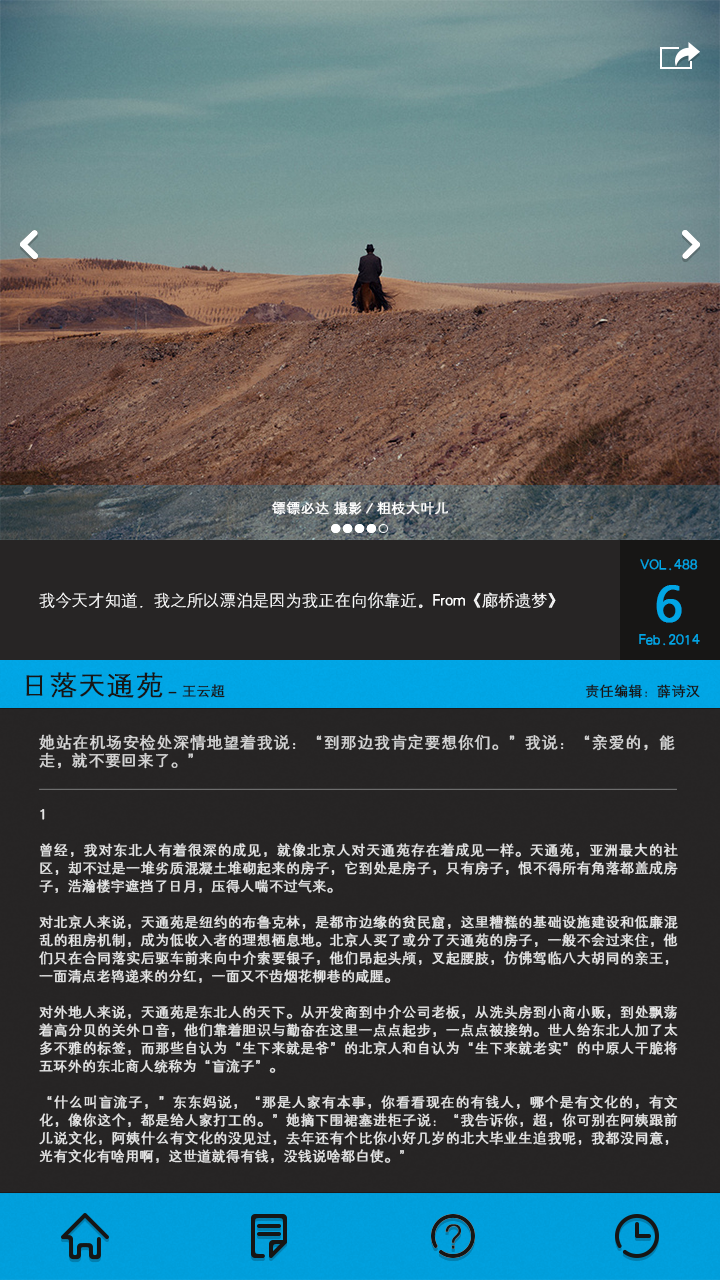
<style>
.page{position:relative;width:720px;height:1280px;background:#272525}
.page>*{position:absolute;margin:0}
.t1{font:13.8px "JXiHei";color:#ffffff;font-weight:bold}
.t2{font:15px "JTeXiDenXian";color:#01a6e6;font-weight:bold}
.t3{font:16px "JTeXiDenXian";color:#ffffff;font-weight:bold}
.t4{font:48px "MicrosoftYaHei";color:#01a6e6;font-weight:bold}
.t5{font:28px "JXiHei";color:#161615;font-weight:bold}
.t6{font:14px "JXiHei";color:#161615;font-weight:bold}
.t7{font:16px/18px "JXiHei";color:#d6d6d6;font-weight:bold}
.t8{font:14px/18px "JXiHei";color:#e6e6e6;font-weight:bold}
</style>
<div class="page">
<p class="t1" style="left:272px;top:501px;width:176px;height:14px">镖镖必达 摄影／粗枝大叶儿</p>
<p class="t2" style="left:640px;top:559px;width:58px;height:12px">VOL.488</p>
<p class="t3" style="left:39px;top:592px;width:517px;height:17px">我今天才知道，我之所以漂泊是因为我正在向你靠近。From《廊桥遗梦》</p>
<p class="t4" style="left:656px;top:585px;width:26px;height:38px">6</p>
<p class="t2" style="left:639px;top:634px;width:61px;height:12px">Feb.2014</p>
<p class="t5" style="left:26px;top:672px;width:137px;height:27px">日落天通苑</p>
<p class="t6" style="left:168px;top:684px;width:57px;height:14px">- 王云超</p>
<p class="t6" style="left:585px;top:684px;width:115px;height:14px">责任编辑：薛诗汉</p>
<p class="t7" style="left:39px;top:734px;width:636px;height:35px;text-align:justify">她站在机场安检处深情地望着我说：“到那边我肯定要想你们。”我说：“亲爱的，能走，就不要回来了。”</p>
<p class="t8" style="left:39px;top:809px;width:639px;height:354px;text-align:justify">1<br><br>曾经，我对东北人有着很深的成见，就像北京人对天通苑存在着成见一样。天通苑，亚洲最大的社区，却不过是一堆劣质混凝土堆砌起来的房子，它到处是房子，只有房子，恨不得所有角落都盖成房子，浩瀚楼宇遮挡了日月，压得人喘不过气来。<br><br>对北京人来说，天通苑是纽约的布鲁克林，是都市边缘的贫民窟，这里糟糕的基础设施建设和低廉混乱的租房机制，成为低收入者的理想栖息地。北京人买了或分了天通苑的房子，一般不会过来住，他们只在合同落实后驱车前来向中介索要银子，他们昂起头颅，叉起腰肢，仿佛驾临八大胡同的亲王，一面清点老鸨递来的分红，一面又不齿烟花柳巷的咸腥。<br><br>对外地人来说，天通苑是东北人的天下。从开发商到中介公司老板，从洗头房到小商小贩，到处飘荡着高分贝的关外口音，他们靠着胆识与勤奋在这里一点点起步，一点点被接纳。世人给东北人加了太多不雅的标签，而那些自认为“生下来就是爷”的北京人和自认为“生下来就老实”的中原人干脆将五环外的东北商人统称为“盲流子”。<br><br>“什么叫盲流子，”东东妈说，“那是人家有本事，你看看现在的有钱人，哪个是有文化的，有文化，像你这个，都是给人家打工的。”她摘下围裙塞进柜子说：“我告诉你，超，你可别在阿姨跟前儿说文化，阿姨什么有文化的没见过，去年还有个比你小好几岁的北大毕业生追我呢，我都没同意，光有文化有啥用啊，这世道就得有钱，没钱说啥都白使。”<br><br>她继续盯着我：“你说阿姨讲的在理儿不，你呀，净扯那些个没用的，你好好努力赚大钱，发财了我就把东东给你，到时候让你叫我声老丈母娘。”我说：“哈哈。”她说：“咋啦，瞧不起我们东东啊，你现在要我还不给呢，想什么呢。”</p>
</div>
